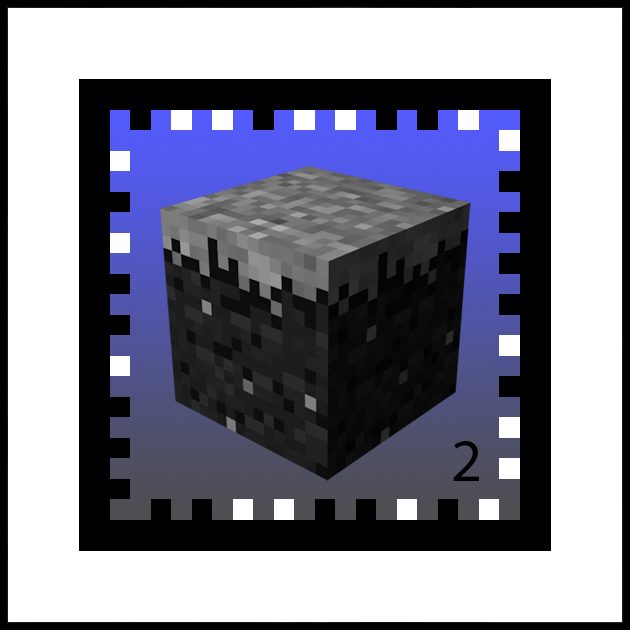
<style>
.page{position:relative;width:630px;height:630px;background:#ffffff}
.page>*{position:absolute;margin:0}
.t1{font:61.1px "MyriadPro-Regular";color:#000000;font-variant:small-caps}
</style>
<div class="page">
<p class="t1" style="left:453px;top:441px;width:26px;height:40px">2</p>
</div>
